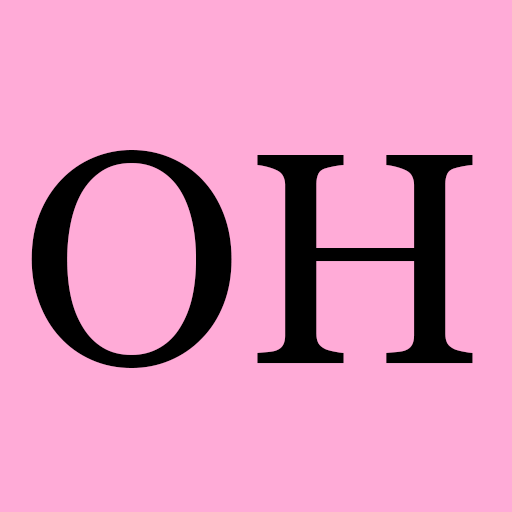
<style>
.page{position:relative;width:512px;height:512px;background:#ffabd7}
.page>*{position:absolute;margin:0}
.t1{font:300px "Georgia";color:#000000}
</style>
<div class="page">
<p class="t1" style="left:31px;top:150px;width:442px;height:218px">OH</p>
</div>
